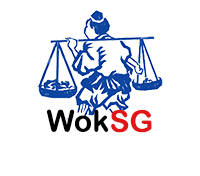
<style>
.page{position:relative;width:200px;height:176px;background:#ffffff}
.page>*{position:absolute;margin:0}
.t1{font:30px "ArialRoundedMTBold";color:#000000}
.t2{font:30px "ArialRoundedMTBold";color:#e11616}
</style>
<div class="page">
<p class="t1" style="left:47px;top:109px;width:62px;height:23px">Wok</p>
<p class="t2" style="left:111px;top:109px;width:41px;height:24px">SG</p>
</div>
